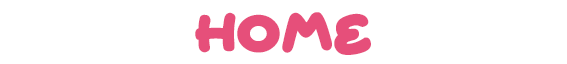
<style>
.page{position:relative;width:567px;height:64px;background:#ffffff}
.page>*{position:absolute;margin:0}
.t1{font:49px "Starborn";color:#e64f7a}
</style>
<div class="page">
<p class="t1" style="left:195px;top:12px;width:176px;height:43px">hOme</p>
</div>
